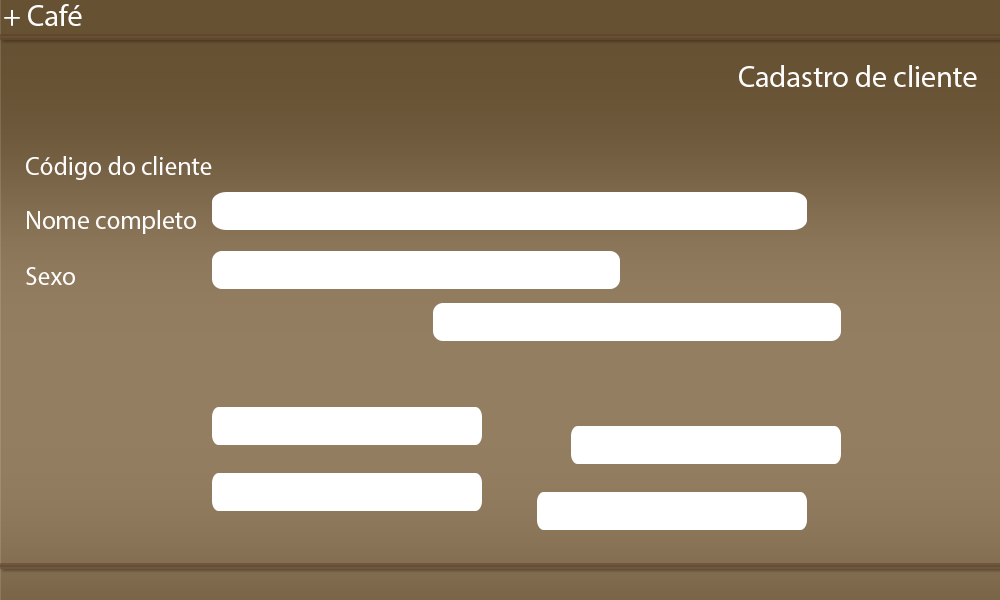
<style>
.page{position:relative;width:1000px;height:600px}
.page>*{position:absolute;margin:0}
.t1{font:30px "MyriadPro-Regular";color:#fefdfb}
.t2{font:29.9px "MyriadPro-Regular";color:#fefdfb}
.t3{font:25.7px "MyriadPro-Regular";color:#fefdfb}
.t4{font:55.1px "MyriadPro-Regular";color:#fefdfb}
</style>
<div class="page">
<p class="t1" style="left:4px;top:4px;width:78px;height:22px">+ Café</p>
<p class="t2" style="left:739px;top:65px;width:238px;height:22px">Cadastro de cliente</p>
<p class="t3" style="left:26px;top:156px;width:186px;height:24px">Código do cliente<br><span class="t4">Non</span></p>
<p class="t3" style="left:27px;top:210px;width:169px;height:24px">Nome completo<br><span class="t4">Non</span></p>
<p class="t3" style="left:26px;top:267px;width:49px;height:18px">Sexo<br><span class="t4">Non</span></p>
</div>
